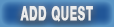
<style>
.page{position:relative;width:114px;height:27px}
.page>*{position:absolute;margin:0}
.t1{font:18.6px "HelveticaNeue-Bold";color:#ffffff;font-weight:bold;scale:0.62 1}
</style>
<div class="page">
<p class="t1" style="left:20px;top:6px;width:73px;height:16px">ADD QUEST</p>
</div>
